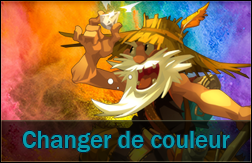
<style>
.page{position:relative;width:252px;height:163px}
.page>*{position:absolute;margin:0}
.t1{font:25px "FranklinGothic-Medium";color:#069bad}
</style>
<div class="page">
<p class="t1" style="left:23px;top:131px;width:207px;height:21px">Changer de couleur</p>
</div>
